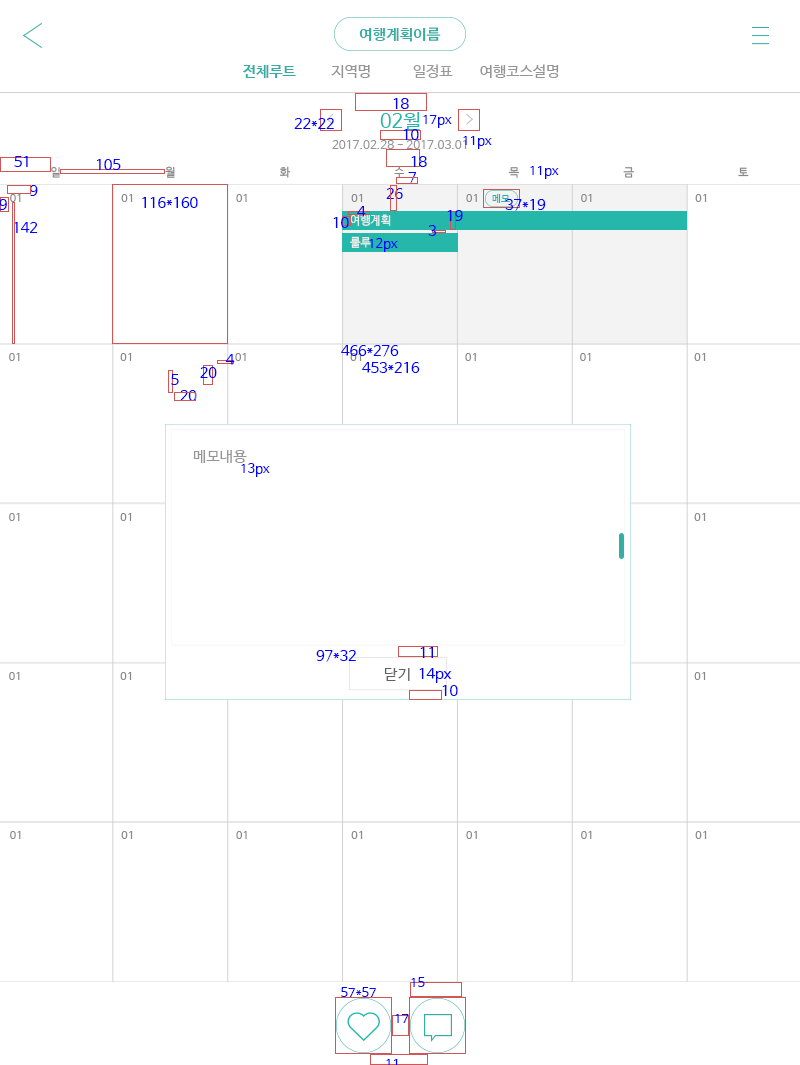
<style>
.page{position:relative;width:800px;height:1065px;background:#ffffff}
.page>*{position:absolute;margin:0}
.t1{font:15px "NanumBarunGothicBold";color:#36ada4}
.t2{font:15px "NanumBarunGothic";color:#959595}
.t3{font:15px "NanumBarunGothic";color:#999a9a}
.t4{font:14.6px "NanumBarunGothic";color:#0000ff}
.t5{font:20px "NanumBarunGothic";color:#25b7aa}
.t6{font:13px "NanumBarunGothic";color:#0000ff}
.t7{font:12px "NanumBarunGothic";color:#959595}
.t8{font:11.4px "NanumBarunGothic";color:#898989}
.t9{font:10px "NanumBarunGothic";color:#25b7aa}
.t10{font:11.4px "NanumBarunGothic";color:#efefef}
.t11{font:14.6px "NanumBarunGothic"}
.t12{font:15px "NanumBarunGothic";letter-spacing:0.025em;color:#626262}
</style>
<div class="page">
<p class="t1" style="left:359px;top:27px;width:82px;height:15px">여행계획이름</p>
<p class="t1" style="left:243px;top:65px;width:53px;height:13px">전체루트</p>
<p class="t2" style="left:331px;top:65px;width:39px;height:13px">지역명</p>
<p class="t3" style="left:413px;top:64px;width:40px;height:14px">일정표</p>
<p class="t2" style="left:480px;top:64px;width:79px;height:14px">여행코스설명</p>
<p class="t4" style="left:393px;top:98px;width:16px;height:11px">18</p>
<p class="t5" style="left:380px;top:112px;width:40px;height:18px">02월</p>
<p class="t4" style="left:294px;top:118px;width:40px;height:11px">22*22</p>
<p class="t6" style="left:423px;top:115px;width:29px;height:13px">17px</p>
<p class="t4" style="left:403px;top:129px;width:16px;height:11px">10</p>
<p class="t6" style="left:463px;top:136px;width:29px;height:13px">11px</p>
<p class="t7" style="left:332px;top:140px;width:135px;height:9px">2017.02.28 - 2017.03.01</p>
<p class="t4" style="left:14px;top:156px;width:14px;height:11px">51</p>
<p class="t4" style="left:97px;top:159px;width:24px;height:11px">105</p>
<p class="t4" style="left:411px;top:156px;width:16px;height:11px">18</p>
<p class="t8" style="left:51px;top:166px;width:9px;height:12px">일</p>
<p class="t8" style="left:165px;top:166px;width:10px;height:12px">월</p>
<p class="t8" style="left:279px;top:166px;width:12px;height:12px">화</p>
<p class="t8" style="left:394px;top:167px;width:10px;height:11px">수</p>
<p class="t4" style="left:408px;top:172px;width:8px;height:12px">7</p>
<p class="t8" style="left:508px;top:167px;width:12px;height:11px">목</p>
<p class="t6" style="left:530px;top:166px;width:29px;height:13px">11px</p>
<p class="t8" style="left:623px;top:167px;width:11px;height:11px">금</p>
<p class="t8" style="left:738px;top:167px;width:11px;height:10px">토</p>
<p class="t4" style="left:29px;top:185px;width:9px;height:11px">9</p>
<p class="t8" style="left:10px;top:194px;width:11px;height:8px">01</p>
<p class="t8" style="left:121px;top:194px;width:12px;height:8px">01</p>
<p class="t4" style="left:142px;top:197px;width:56px;height:11px">116*160</p>
<p class="t8" style="left:236px;top:194px;width:11px;height:8px">01</p>
<p class="t8" style="left:351px;top:194px;width:12px;height:8px">01</p>
<p class="t4" style="left:386px;top:188px;width:17px;height:11px">26</p>
<p class="t8" style="left:466px;top:194px;width:11px;height:8px">01</p>
<p class="t9" style="left:492px;top:194px;width:18px;height:9px">메모</p>
<p class="t8" style="left:581px;top:194px;width:11px;height:8px">01</p>
<p class="t8" style="left:695px;top:194px;width:12px;height:8px">01</p>
<p class="t4" style="left:0px;top:199px;width:7px;height:11px">9</p>
<p class="t4" style="left:357px;top:206px;width:9px;height:11px">4</p>
<p class="t4" style="left:505px;top:199px;width:41px;height:12px">37*19</p>
<p class="t4" style="left:14px;top:222px;width:24px;height:11px">142</p>
<p class="t4" style="left:333px;top:217px;width:16px;height:11px">10</p>
<p class="t10" style="left:350px;top:214px;width:41px;height:12px">여행계획</p>
<p class="t4" style="left:447px;top:210px;width:16px;height:11px">19</p>
<p class="t4" style="left:428px;top:225px;width:9px;height:11px">3</p>
<p class="t10" style="left:350px;top:236px;width:21px;height:12px">룰루</p>
<p class="t6" style="left:369px;top:238px;width:29px;height:14px">12px</p>
<p class="t8" style="left:9px;top:353px;width:11px;height:8px">01</p>
<p class="t8" style="left:120px;top:353px;width:12px;height:8px">01</p>
<p class="t8" style="left:235px;top:353px;width:11px;height:8px">01</p>
<p class="t4" style="left:341px;top:345px;width:58px;height:12px">466*276</p>
<p class="t8" style="left:350px;top:353px;width:12px;height:8px">01</p>
<p class="t8" style="left:465px;top:353px;width:11px;height:8px">01</p>
<p class="t8" style="left:580px;top:353px;width:11px;height:8px">01</p>
<p class="t8" style="left:694px;top:353px;width:12px;height:8px">01</p>
<p class="t4" style="left:225px;top:354px;width:10px;height:11px">4</p>
<p class="t4" style="left:362px;top:362px;width:58px;height:11px">453*216</p>
<p class="t4" style="left:171px;top:374px;width:8px;height:11px">5</p>
<p class="t4" style="left:200px;top:367px;width:17px;height:11px">20</p>
<p class="t11" style="left:180px;top:390px;width:17px;height:11px">20</p>
<p class="t2" style="left:193px;top:450px;width:54px;height:13px">메모내용</p>
<p class="t6" style="left:241px;top:463px;width:29px;height:14px">13px</p>
<p class="t8" style="left:9px;top:513px;width:11px;height:8px">01</p>
<p class="t8" style="left:120px;top:513px;width:12px;height:8px">01</p>
<p class="t8" style="left:694px;top:513px;width:12px;height:8px">01</p>
<p class="t4" style="left:316px;top:650px;width:40px;height:12px">97*32</p>
<p class="t4" style="left:420px;top:647px;width:13px;height:11px">11</p>
<p class="t8" style="left:9px;top:672px;width:11px;height:8px">01</p>
<p class="t8" style="left:120px;top:672px;width:12px;height:8px">01</p>
<p class="t12" style="left:384px;top:668px;width:26px;height:13px">닫기</p>
<p class="t4" style="left:419px;top:668px;width:33px;height:15px">14px</p>
<p class="t8" style="left:694px;top:672px;width:12px;height:8px">01</p>
<p class="t4" style="left:442px;top:685px;width:16px;height:11px">10</p>
<p class="t8" style="left:10px;top:831px;width:11px;height:8px">01</p>
<p class="t8" style="left:121px;top:831px;width:12px;height:8px">01</p>
<p class="t8" style="left:236px;top:831px;width:11px;height:8px">01</p>
<p class="t8" style="left:351px;top:831px;width:12px;height:8px">01</p>
<p class="t8" style="left:466px;top:831px;width:11px;height:8px">01</p>
<p class="t8" style="left:581px;top:831px;width:11px;height:8px">01</p>
<p class="t8" style="left:695px;top:831px;width:12px;height:8px">01</p>
<p class="t6" style="left:411px;top:977px;width:14px;height:10px">15</p>
<p class="t6" style="left:341px;top:987px;width:35px;height:10px">57*57</p>
<p class="t6" style="left:395px;top:1014px;width:14px;height:9px">17</p>
</div>
